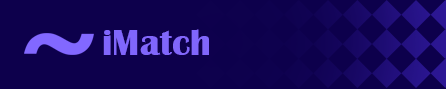
<style>
.page{position:relative;width:446px;height:89px;background:#0d004c}
.page>*{position:absolute;margin:0}
.t1{font:37.8px "BritannicBold";color:#8066fc}
</style>
<div class="page">
<p class="t1" style="left:103px;top:29px;width:106px;height:26px">iMatch</p>
</div>
